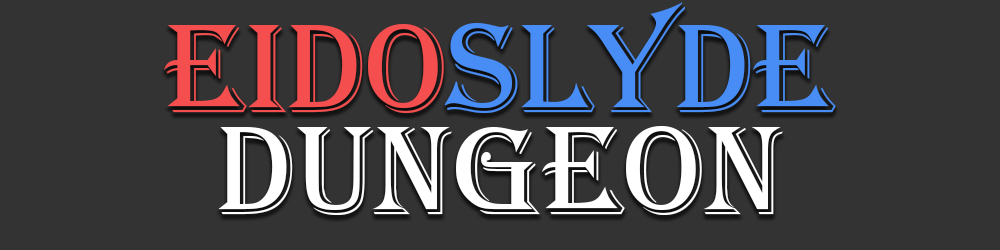
<style>
.page{position:relative;width:1000px;height:250px;background:#333333}
.page>*{position:absolute;margin:0}
.t1{font:130.8px/102.5px "Algerian";color:#ffffff}
.t2{font:130.8px/102.5px "Algerian";color:#f44e4e}
.t3{font:130.8px/102.5px "Algerian";color:#488df5}
</style>
<div class="page">
<p class="t1" style="left:164px;top:2px;width:672px;height:213px;text-align:center"><span class="t2">EIDO</span><span class="t3">SLYDE<br></span>DUNGEON</p>
</div>
